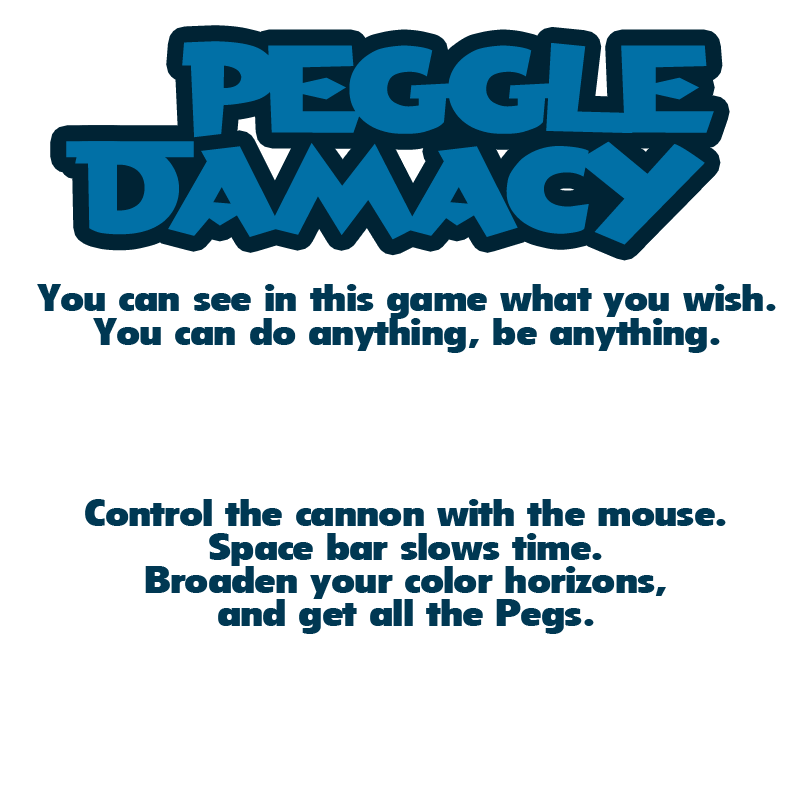
<style>
.page{position:relative;width:800px;height:800px;background:#ffffff}
.page>*{position:absolute;margin:0}
.t1{font:128px/33.3px "AndersonTorchyTheBatteryBoy";letter-spacing:-0.1em;color:#0170a6;scale:1.25 1}
.t2{font:37.3px/33.3px "ThereSignHead3";letter-spacing:-0.02em;color:#003853;scale:1.25 1}
</style>
<div class="page">
<p class="t1" style="left:66px;top:41px;width:648px;height:204px;text-align:center">_Peggle<br><br><br>Damacy</p>
<p class="t2" style="left:37px;top:284px;width:739px;height:69px;text-align:center">You can see in this game what you wish.<br>You can do anything, be anything.</p>
<p class="t2" style="left:85px;top:499px;width:641px;height:135px;text-align:center">Control the cannon with the mouse.<br>Space bar slows time.<br>Broaden your color horizons,<br>and get all the Pegs.</p>
</div>
